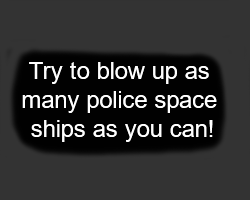
<style>
.page{position:relative;width:250px;height:200px;background:#333333}
.page>*{position:absolute;margin:0}
.t1{font:24px "ArialMT";color:#ffffff}
</style>
<div class="page">
<p class="t1" style="left:22px;top:62px;width:195px;height:80px;text-align:center">Try to blow up as <br>many police space <br>ships as you can!</p>
</div>
